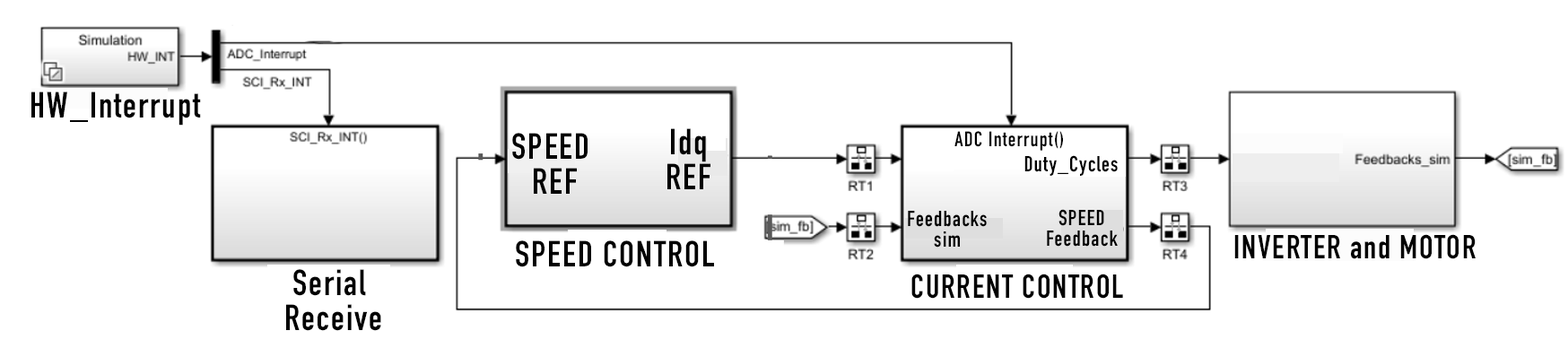
<style>
.page{position:relative;width:1568px;height:357px;background:#ffffff}
.page>*{position:absolute;margin:0}
.t1{font:35.9px "DINEngschriftStd";letter-spacing:0.048em;color:#000000}
.t2{font:35.9px/11.7px "DINEngschriftStd";letter-spacing:0.048em;color:#000000}
.t3{font:20.8px "DINEngschriftStd";letter-spacing:0.048em;color:#000000}
.t4{font:21.5px "DINEngschriftStd";letter-spacing:0.048em;color:#000000}
.t5{font:21.5px/7px "DINEngschriftStd";letter-spacing:0.048em;color:#000000}
.t6{font:32.6px "DINEngschriftStd";letter-spacing:0.048em;color:#000000}
</style>
<div class="page">
<p class="t1" style="left:31px;top:91px;width:170px;height:35px">HW_Interrupt</p>
<p class="t2" style="left:512px;top:133px;width:76px;height:61px;text-align:center">SPEED <br><br><br>REF</p>
<p class="t2" style="left:667px;top:128px;width:43px;height:61px;text-align:center">Idq<br><br><br>REF</p>
<p class="t3" style="left:954px;top:131px;width:109px;height:20px">ADC Interrupt()</p>
<p class="t4" style="left:1024px;top:155px;width:94px;height:21px">Duty_Cycles</p>
<p class="t5" style="left:1047px;top:209px;width:71px;height:38px;text-align:center">SPEED<br><br><br>Feedback</p>
<p class="t5" style="left:908px;top:211px;width:79px;height:37px;text-align:center">Feedbacks<br><br><br>sim</p>
<p class="t1" style="left:516px;top:240px;width:198px;height:27px">SPEED CONTROL</p>
<p class="t6" style="left:1234px;top:234px;width:242px;height:25px">INVERTER and MOTOR</p>
<p class="t2" style="left:286px;top:269px;width:95px;height:62px;text-align:center">Serial <br><br><br>Receive</p>
<p class="t6" style="left:911px;top:274px;width:212px;height:25px">CURRENT CONTROL</p>
</div>
